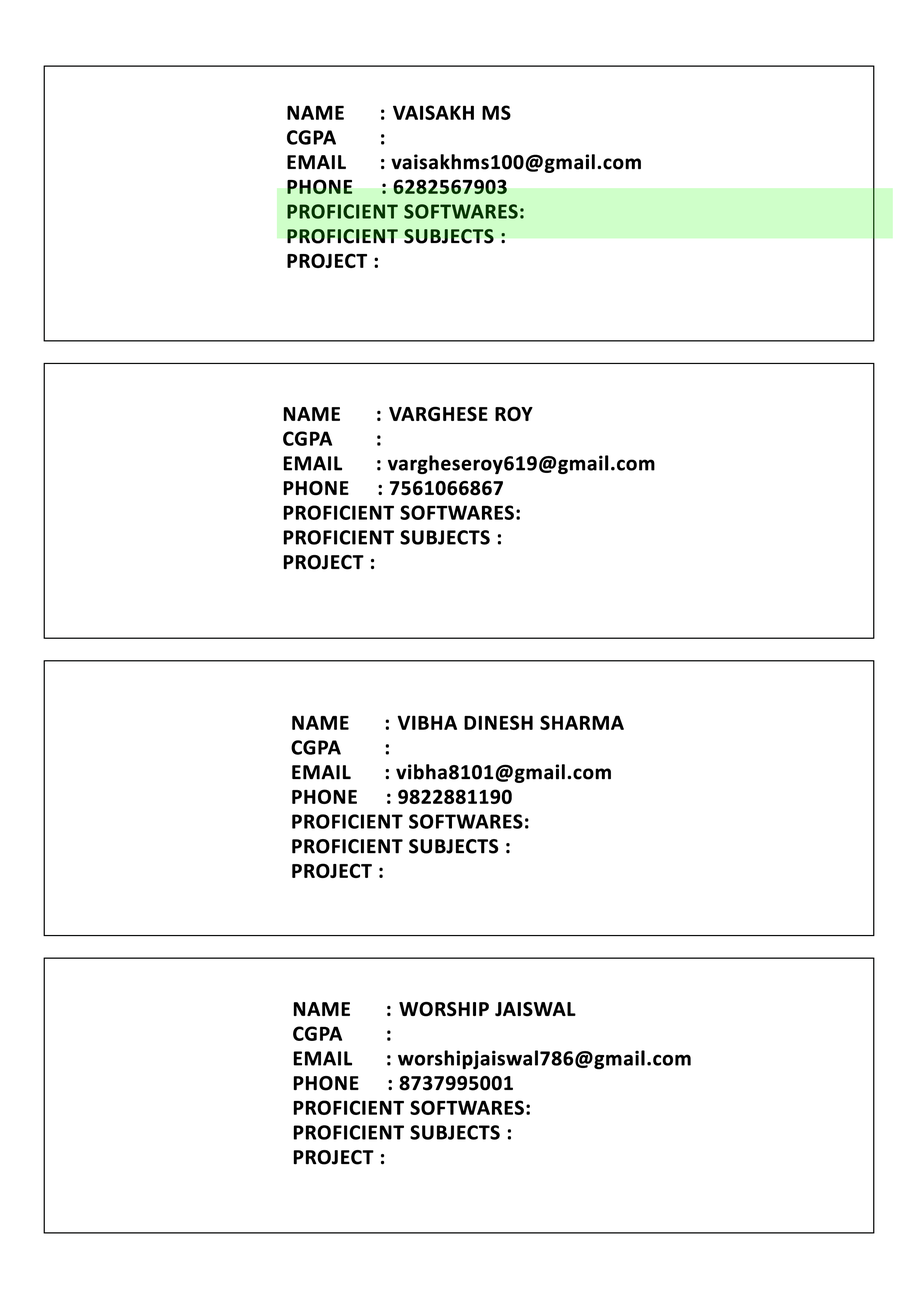
<style>
.page{position:relative;width:918px;height:1299px;background:#ffffff}
.page>*{position:absolute;margin:0}
.t1{font:21.6px/24.7px "Calibri-Bold";color:#000000;font-weight:bold}
</style>
<div class="page">
<p class="t1" style="left:287px;top:106px;width:354px;height:162px">NAME   : VAISAKH MS<br>CGPA    :   <br>EMAIL      : vaisakhms100@gmail.com<br>PHONE     : 6282567903<br>PROFICIENT SOFTWARES:<br>PROFICIENT SUBJECTS :<br>PROJECT :</p>
<p class="t1" style="left:283px;top:407px;width:372px;height:162px">NAME   : VARGHESE ROY<br>CGPA    :   <br>EMAIL      : vargheseroy619@gmail.com<br>PHONE     : 7561066867<br>PROFICIENT SOFTWARES:<br>PROFICIENT SUBJECTS :<br>PROJECT :</p>
<p class="t1" style="left:292px;top:715px;width:332px;height:163px">NAME   : VIBHA DINESH SHARMA<br>CGPA    :   <br>EMAIL      : vibha8101@gmail.com<br>PHONE     : 9822881190<br>PROFICIENT SOFTWARES:<br>PROFICIENT SUBJECTS :<br>PROJECT :</p>
<p class="t1" style="left:293px;top:1001px;width:398px;height:163px">NAME   : WORSHIP JAISWAL <br>CGPA    :   <br>EMAIL      : worshipjaiswal786@gmail.com<br>PHONE     : 8737995001<br>PROFICIENT SOFTWARES:<br>PROFICIENT SUBJECTS :<br>PROJECT :</p>
</div>
